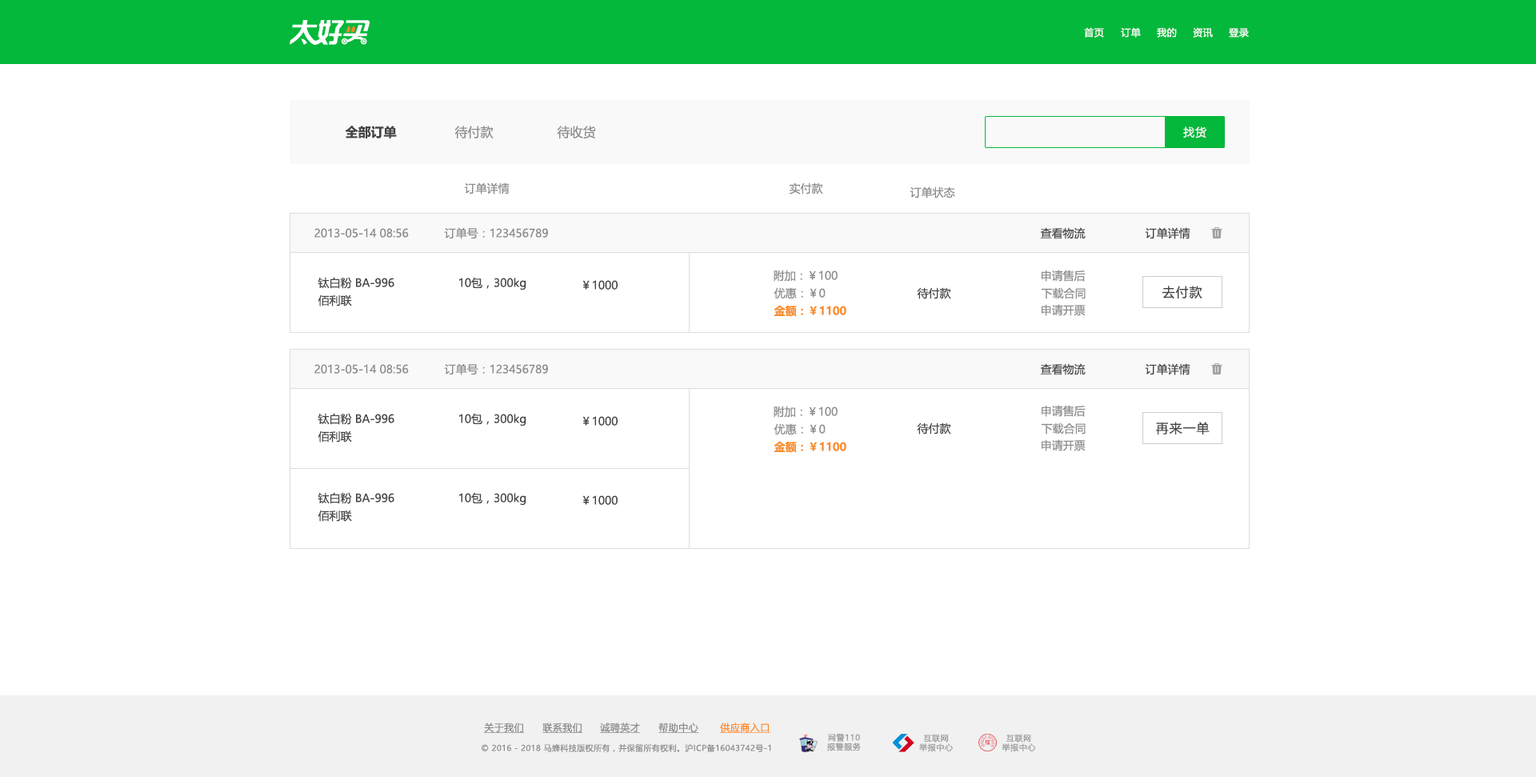
<style>
.page{position:relative;width:1536px;height:777px;background:#ffffff}
.page>*{position:absolute;margin:0}
.t1{font:9.6px "MicrosoftYaHeiUI";letter-spacing:0.04em;color:#ffffff}
.t2{font:12.8px "MicrosoftYaHeiUI-Bold";color:#444444}
.t3{font:12.8px "MicrosoftYaHeiUI";color:#8c8c8c}
.t4{font:11.2px "MicrosoftYaHeiUI";letter-spacing:0.06em;color:#f7f7f7}
.t5{font:11.2px "MicrosoftYaHeiUI";color:#8c8c8c}
.t6{font:11.2px "MicrosoftYaHeiUI";color:#444444}
.t7{font:12.8px "MicrosoftYaHeiUI";letter-spacing:0.06em;color:#444444}
.t8{font:11.2px "MicrosoftYaHeiUI-Bold";color:#fa8f2e}
.t9{font:9.6px "MicrosoftYaHeiUI";letter-spacing:0.04em;color:#8c8c8c;text-decoration:underline}
.t10{font:9.6px "MicrosoftYaHeiUI";letter-spacing:0.04em;color:#ff8b25;text-decoration:underline}
.t11{font:8px/9.3px "MicrosoftYaHei";letter-spacing:0.06em;color:#999999}
.t12{font:8px "MicrosoftYaHeiUI";letter-spacing:0.04em;color:#8c8c8c}
</style>
<div class="page">
<p class="t1" style="left:1084px;top:27px;width:20px;height:11px">首页</p>
<p class="t1" style="left:1120px;top:27px;width:20px;height:11px">订单</p>
<p class="t1" style="left:1156px;top:27px;width:20px;height:11px">我的</p>
<p class="t1" style="left:1192px;top:27px;width:20px;height:11px">资讯</p>
<p class="t1" style="left:1228px;top:28px;width:20px;height:10px">登录</p>
<p class="t2" style="left:345px;top:126px;width:52px;height:12px">全部订单</p>
<p class="t3" style="left:454px;top:126px;width:39px;height:12px">待付款</p>
<p class="t3" style="left:557px;top:126px;width:39px;height:12px">待收货</p>
<p class="t4" style="left:1183px;top:126px;width:23px;height:12px">找货</p>
<p class="t5" style="left:464px;top:182px;width:45px;height:12px">订单详情</p>
<p class="t5" style="left:789px;top:182px;width:34px;height:12px">实付款</p>
<p class="t5" style="left:909px;top:186px;width:46px;height:12px">订单状态</p>
<p class="t5" style="left:314px;top:228px;width:95px;height:10px">2013-05-14 08:56</p>
<p class="t5" style="left:444px;top:227px;width:104px;height:12px">订单号：123456789</p>
<p class="t6" style="left:1040px;top:227px;width:45px;height:12px">查看物流</p>
<p class="t6" style="left:1144px;top:227px;width:46px;height:12px">订单详情</p>
<p class="t5" style="left:773px;top:270px;width:64px;height:12px">附加：￥100</p>
<p class="t5" style="left:1041px;top:270px;width:44px;height:12px">申请售后</p>
<p class="t6" style="left:318px;top:277px;width:76px;height:12px">钛白粉 BA-996</p>
<p class="t6" style="left:459px;top:277px;width:67px;height:13px">10包，300kg</p>
<p class="t6" style="left:582px;top:280px;width:35px;height:10px">￥1000</p>
<p class="t5" style="left:773px;top:287px;width:52px;height:12px">优惠：￥0</p>
<p class="t6" style="left:917px;top:287px;width:34px;height:12px">待付款</p>
<p class="t5" style="left:1040px;top:287px;width:45px;height:12px">下载合同</p>
<p class="t7" style="left:1162px;top:286px;width:40px;height:13px">去付款</p>
<p class="t6" style="left:318px;top:294px;width:34px;height:12px">佰利联</p>
<p class="t8" style="left:773px;top:305px;width:73px;height:12px">金额：￥1100</p>
<p class="t5" style="left:1041px;top:304px;width:44px;height:12px">申请开票</p>
<p class="t5" style="left:314px;top:364px;width:95px;height:9px">2013-05-14 08:56</p>
<p class="t5" style="left:444px;top:363px;width:104px;height:12px">订单号：123456789</p>
<p class="t6" style="left:1040px;top:363px;width:45px;height:12px">查看物流</p>
<p class="t6" style="left:1144px;top:363px;width:46px;height:12px">订单详情</p>
<p class="t6" style="left:318px;top:413px;width:76px;height:12px">钛白粉 BA-996</p>
<p class="t6" style="left:459px;top:413px;width:67px;height:13px">10包，300kg</p>
<p class="t5" style="left:773px;top:405px;width:64px;height:12px">附加：￥100</p>
<p class="t5" style="left:1041px;top:405px;width:44px;height:12px">申请售后</p>
<p class="t6" style="left:582px;top:416px;width:35px;height:9px">￥1000</p>
<p class="t5" style="left:773px;top:423px;width:52px;height:12px">优惠：￥0</p>
<p class="t6" style="left:917px;top:422px;width:34px;height:12px">待付款</p>
<p class="t5" style="left:1040px;top:422px;width:45px;height:12px">下载合同</p>
<p class="t7" style="left:1156px;top:421px;width:53px;height:13px">再来一单</p>
<p class="t6" style="left:318px;top:430px;width:34px;height:12px">佰利联</p>
<p class="t8" style="left:773px;top:441px;width:73px;height:12px">金额：￥1100</p>
<p class="t5" style="left:1041px;top:439px;width:44px;height:12px">申请开票</p>
<p class="t6" style="left:318px;top:492px;width:76px;height:12px">钛白粉 BA-996</p>
<p class="t6" style="left:459px;top:492px;width:67px;height:13px">10包，300kg</p>
<p class="t6" style="left:582px;top:495px;width:35px;height:10px">￥1000</p>
<p class="t6" style="left:318px;top:509px;width:34px;height:12px">佰利联</p>
<p class="t9" style="left:484px;top:722px;width:41px;height:11px">关于我们</p>
<p class="t9" style="left:542px;top:722px;width:41px;height:11px">联系我们</p>
<p class="t9" style="left:600px;top:722px;width:41px;height:11px">诚聘英才</p>
<p class="t9" style="left:658px;top:722px;width:41px;height:11px">帮助中心</p>
<p class="t10" style="left:720px;top:722px;width:50px;height:11px">供应商入口</p>
<p class="t11" style="left:827px;top:733px;width:34px;height:18px;text-align:center">网警110<br>报警服务</p>
<p class="t11" style="left:919px;top:733px;width:34px;height:18px;text-align:center">互联网<br>举报中心</p>
<p class="t11" style="left:1001px;top:733px;width:35px;height:18px;text-align:center">互联网<br>举报中心</p>
<p class="t12" style="left:481px;top:743px;width:290px;height:9px">© 2016 - 2018 马蜂科技版权所有，并保留所有权利。沪ICP备16043742号-1</p>
</div>
